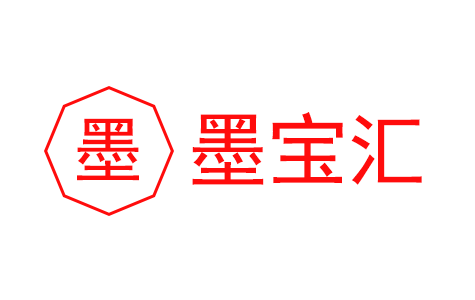
<style>
.page{position:relative;width:475px;height:300px;background:#ffffff}
.page>*{position:absolute;margin:0}
.t1{font:79.7px "SimHei";color:#ff0c0c}
.t2{font:69.7px "SimHei";color:#ff0c0c}
</style>
<div class="page">
<p class="t1" style="left:192px;top:112px;width:230px;height:73px">墨宝汇</p>
<p class="t2" style="left:77px;top:118px;width:62px;height:63px">墨</p>
</div>
